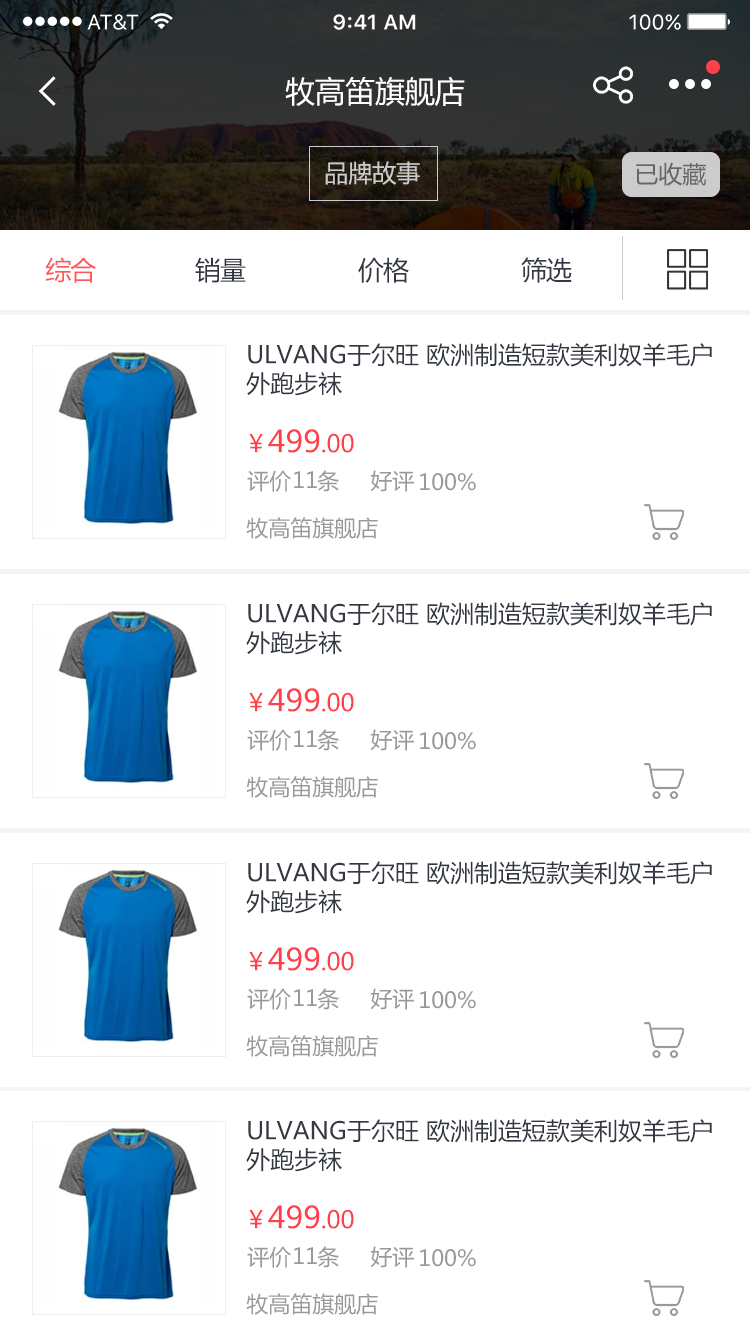
<style>
.page{position:relative;width:750px;height:1335px;background:#ffffff}
.page>*{position:absolute;margin:0}
.t1{font:30px "MicrosoftYaHei";color:#ffffff}
.t2{font:24px "MicrosoftYaHei";color:#cccccc}
.t3{font:24px "MicrosoftYaHei";color:#666666}
.t4{font:26px "MicrosoftYaHei";letter-spacing:-0.04em;color:#343843}
.t5{font:26px "MicrosoftYaHei";letter-spacing:-0.04em;color:#ff5858}
.t6{font:24px "MicrosoftYaHei";color:#343843}
.t7{font:30px "MicrosoftYaHei";color:#fe404c}
.t8{font:24px "MicrosoftYaHei";color:#fe404c}
.t9{font:22px "MicrosoftYaHei";color:#999999}
</style>
<div class="page">
<p class="t1" style="left:285px;top:76px;width:180px;height:30px">牧高笛旗舰店</p>
<p class="t2" style="left:325px;top:161px;width:95px;height:24px">品牌故事</p>
<p class="t3" style="left:636px;top:162px;width:70px;height:24px">已收藏</p>
<p class="t4" style="left:45px;top:257px;width:527px;height:26px"><span class="t5">综合</span>               销量                 价格                 筛选</p>
<p class="t6" style="left:246px;top:343px;width:466px;height:53px">ULVANG于尔旺 欧洲制造短款美利奴羊毛户外跑步袜</p>
<p class="t7" style="left:249px;top:429px;width:105px;height:24px"><span class="t8">￥</span>499<span class="t8">.00</span></p>
<p class="t9" style="left:247px;top:470px;width:92px;height:22px">评价    条</p>
<p class="t9" style="left:294px;top:471px;width:23px;height:17px">11</p>
<p class="t9" style="left:370px;top:470px;width:44px;height:22px">好评</p>
<p class="t9" style="left:420px;top:473px;width:56px;height:18px">100%</p>
<p class="t9" style="left:246px;top:517px;width:132px;height:22px">牧高笛旗舰店</p>
<p class="t6" style="left:246px;top:602px;width:466px;height:53px">ULVANG于尔旺 欧洲制造短款美利奴羊毛户外跑步袜</p>
<p class="t7" style="left:249px;top:688px;width:105px;height:24px"><span class="t8">￥</span>499<span class="t8">.00</span></p>
<p class="t9" style="left:247px;top:729px;width:92px;height:22px">评价    条</p>
<p class="t9" style="left:294px;top:730px;width:23px;height:17px">11</p>
<p class="t9" style="left:370px;top:729px;width:44px;height:22px">好评</p>
<p class="t9" style="left:420px;top:732px;width:56px;height:18px">100%</p>
<p class="t9" style="left:246px;top:776px;width:132px;height:22px">牧高笛旗舰店</p>
<p class="t6" style="left:246px;top:861px;width:466px;height:53px">ULVANG于尔旺 欧洲制造短款美利奴羊毛户外跑步袜</p>
<p class="t7" style="left:249px;top:947px;width:105px;height:24px"><span class="t8">￥</span>499<span class="t8">.00</span></p>
<p class="t9" style="left:247px;top:988px;width:92px;height:22px">评价    条</p>
<p class="t9" style="left:294px;top:989px;width:23px;height:17px">11</p>
<p class="t9" style="left:370px;top:988px;width:44px;height:22px">好评</p>
<p class="t9" style="left:420px;top:991px;width:56px;height:18px">100%</p>
<p class="t9" style="left:246px;top:1035px;width:132px;height:22px">牧高笛旗舰店</p>
<p class="t6" style="left:246px;top:1119px;width:466px;height:53px">ULVANG于尔旺 欧洲制造短款美利奴羊毛户外跑步袜</p>
<p class="t7" style="left:249px;top:1205px;width:105px;height:24px"><span class="t8">￥</span>499<span class="t8">.00</span></p>
<p class="t9" style="left:247px;top:1246px;width:92px;height:22px">评价    条</p>
<p class="t9" style="left:294px;top:1247px;width:23px;height:17px">11</p>
<p class="t9" style="left:370px;top:1246px;width:44px;height:22px">好评</p>
<p class="t9" style="left:420px;top:1249px;width:56px;height:18px">100%</p>
<p class="t9" style="left:246px;top:1293px;width:132px;height:22px">牧高笛旗舰店</p>
</div>
